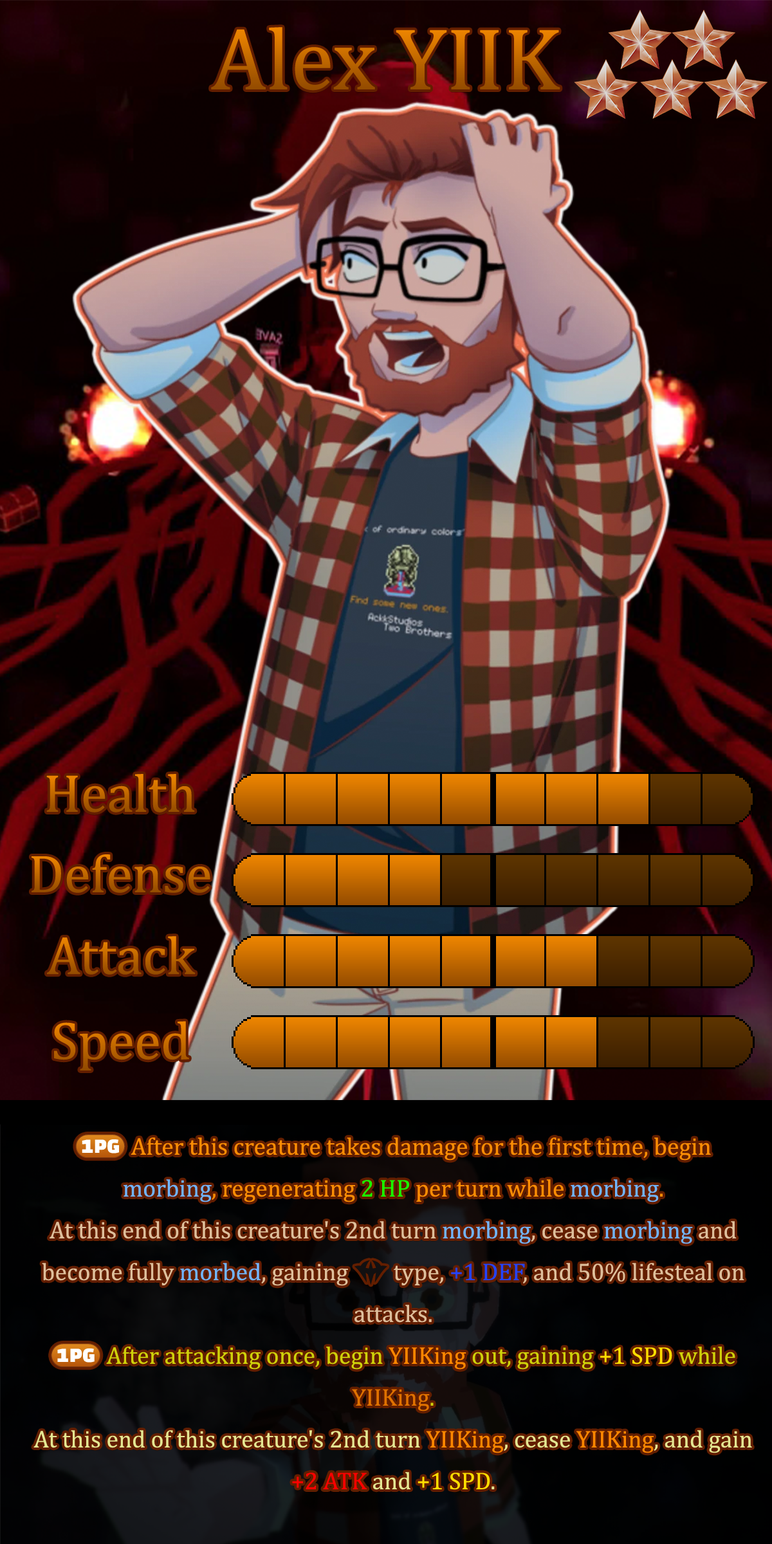
<style>
.page{position:relative;width:772px;height:1544px}
.page>*{position:absolute;margin:0}
.t1{font:152.5px "Cambria"}
.t2{font:92.7px "Cambria"}
.t3{font:41.8px/41.8px "Cambria";color:#fb8d04}
.t4{font:41.8px/41.8px "stoogedings-Regular";color:#fb8d04}
.t5{font:41.8px/41.8px "Cambria";color:#71b4ff}
.t6{font:41.8px/41.8px "Cambria";color:#18ff00}
.t7{font:41.8px/41.8px "Cambria";color:#debf9c}
.t8{font:41.8px/41.8px "stoogedings-Regular";color:#debf9c}
.t9{font:41.8px/41.8px "Cambria";color:#2443ff}
.t10{font:41.8px/41.8px "stoogedings-Regular";color:#cfd10a}
.t11{font:41.8px/41.8px "Cambria";color:#cfd10a}
.t12{font:41.8px/41.8px "Cambria";color:#ff8700}
.t13{font:41.8px/41.8px "Cambria";color:#ffde00}
.t14{font:41.8px/41.8px "Cambria";color:#e07200}
.t15{font:41.8px/41.8px "Cambria";color:#e4e793}
.t16{font:41.8px/41.8px "Cambria";color:#ff0000}
</style>
<div class="page">
<p class="t1" style="left:211px;top:27px;width:349px;height:64px">Alex YIIK</p>
<p class="t2" style="left:46px;top:774px;width:149px;height:39px">Health</p>
<p class="t2" style="left:32px;top:855px;width:178px;height:38px">Defense</p>
<p class="t2" style="left:47px;top:936px;width:149px;height:39px">Attack</p>
<p class="t2" style="left:54px;top:1021px;width:135px;height:50px">Speed</p>
<p class="t3" style="left:33px;top:1134px;width:719px;height:356px;text-align:center"><span class="t4">(1PG)</span> After this creature takes damage for the first time, begin <span class="t5">morbing</span>, regenerating <span class="t6">2 HP</span> per turn while <span class="t5">morbing</span>.<br><span class="t7">At this end of this creature's 2nd turn </span><span class="t5">morbing</span><span class="t7">, cease </span><span class="t5">morbing</span><span class="t7"> and become fully </span><span class="t5">morbed</span><span class="t7">, gaining </span><span class="t8">[dark]</span><span class="t7"> type, </span><span class="t9">+1 DEF</span><span class="t7">, and 50% lifesteal on attacks.<br></span><span class="t10">(1PG)</span><span class="t11"> After attacking once, begin </span><span class="t12">YIIKing</span><span class="t11"> out, gaining </span><span class="t13">+1 SPD</span><span class="t11"> while </span><span class="t14">YIIKing</span><span class="t11">.<br></span><span class="t15">At this end of this creature's 2nd turn </span><span class="t12">YIIKing</span><span class="t15">, cease </span><span class="t12">YIIKing</span><span class="t15">, and gain </span><span class="t16">+2 ATK </span><span class="t15">and </span><span class="t13">+1 SPD</span><span class="t15">.</span></p>
</div>
